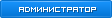
<style>
.page{position:relative;width:112px;height:18px}
.page>*{position:absolute;margin:0}
.t1{font:11px "Visitor_Rus";color:#ffffff}
</style>
<div class="page">
<p class="t1" style="left:19px;top:7px;width:77px;height:5px">администратор</p>
</div>
